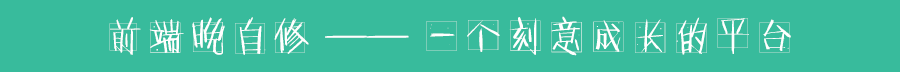
<style>
.page{position:relative;width:900px;height:72px;background:#38bb9c}
.page>*{position:absolute;margin:0}
.t1{font:41.7px "FZNHT";color:#ffffff}
</style>
<div class="page">
<p class="t1" style="left:109px;top:16px;width:682px;height:40px">前端晚自修 —— 一个刻意成长的平台</p>
</div>
